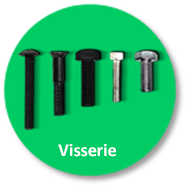
<style>
.page{position:relative;width:185px;height:185px;background:#00cc66}
.page>*{position:absolute;margin:0}
.t1{font:18px "Calibri-Bold";color:#ffffff}
</style>
<div class="page">
<p class="t1" style="left:58px;top:144px;width:58px;height:13px">Visserie</p>
</div>
